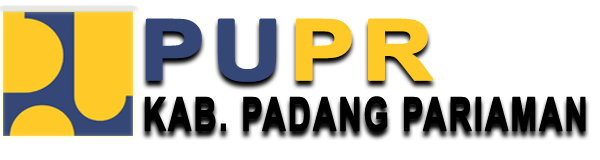
<style>
.page{position:relative;width:600px;height:160px;background:#ffffff}
.page>*{position:absolute;margin:0}
.t1{font:83.4px "Arial-BoldMT";letter-spacing:0.05em;color:#354777;font-weight:bold;scale:1.16 1}
.t2{font:83.4px "Arial-BoldMT";letter-spacing:0.05em;color:#ffc928;font-weight:bold;scale:1.16 1}
.t3{font:46.2px "Arial-BoldMT";letter-spacing:0.05em;color:#000000;font-weight:bold;scale:0.69 1}
</style>
<div class="page">
<p class="t1" style="left:145px;top:18px;width:289px;height:64px">PU<span class="t2">PR</span></p>
<p class="t3" style="left:144px;top:96px;width:442px;height:36px">KAB. PADANG PARIAMAN</p>
</div>
